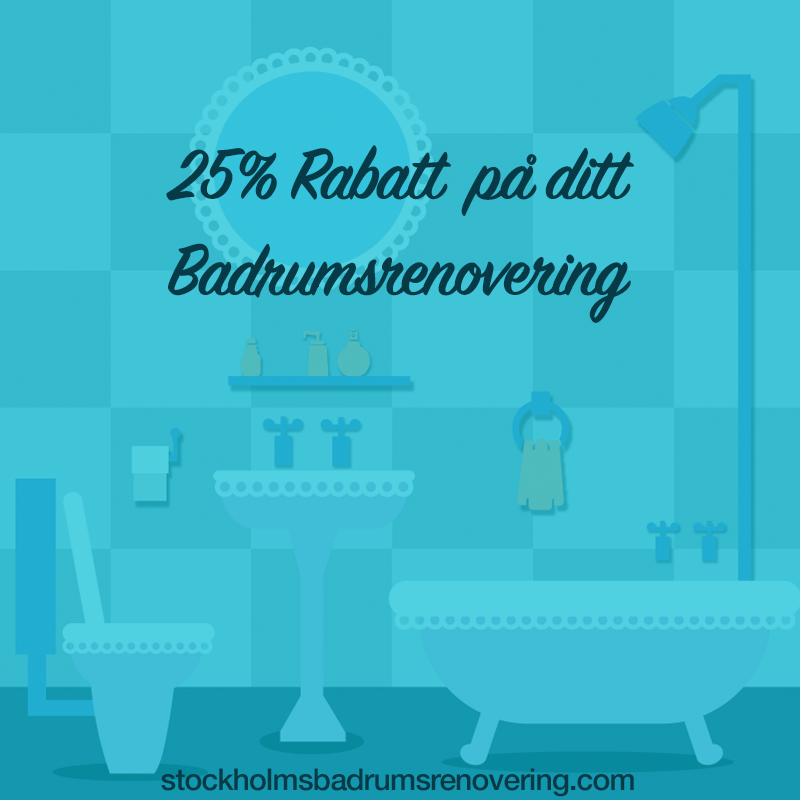
<style>
.page{position:relative;width:800px;height:800px;background:#40c4d8}
.page>*{position:absolute;margin:0}
.t1{font:80px "SignPainter-HouseScriptSemibold";letter-spacing:-0.026em;color:#063a47}
.t2{font:30px "HelveticaNeue-Medium";letter-spacing:-0.026em;color:#063a47}
</style>
<div class="page">
<p class="t1" style="left:166px;top:145px;width:468px;height:178px;text-align:center">25% Rabatt  på ditt <br>Badrumsrenovering</p>
<p class="t2" style="left:161px;top:768px;width:473px;height:29px">stockholmsbadrumsrenovering.com</p>
</div>
